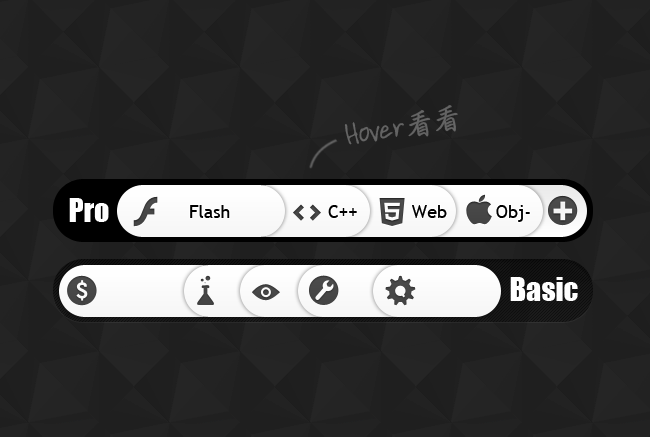
<style>
.page{position:relative;width:650px;height:437px;background:#1f1f1f}
.page>*{position:absolute;margin:0}
.t1{font:30px "ArdleysHand-Plain";color:#636363}
.t2{font:30px "HYi2gj";letter-spacing:-0.1em;color:#636363;font-weight:bold}
.t3{font:30px "Impact";color:#ffffff}
.t4{font:18px "TrebuchetMS";color:#000000}
</style>
<div class="page">
<p class="t1" style="left:344px;top:105px;width:114px;height:40px;rotate:-10deg">Hover<span class="t2">看看</span></p>
<p class="t3" style="left:69px;top:198px;width:40px;height:24px">Pro</p>
<p class="t4" style="left:190px;top:205px;width:340px;height:17px">Flash                  C++          Web         Obj-</p>
<p class="t3" style="left:510px;top:277px;width:68px;height:24px">Basic</p>
</div>
